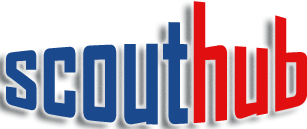
<style>
.page{position:relative;width:307px;height:129px;background:#ffffff}
.page>*{position:absolute;margin:0}
.t1{font:99.2px "AgencyFB-Bold";color:#1a498e}
.t2{font:99.2px "AgencyFB-Bold";color:#e10f0f}
</style>
<div class="page">
<p class="t1" style="left:6px;top:1px;width:301px;height:124px">scout<span class="t2">hub</span></p>
</div>
